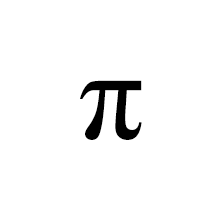
<style>
.page{position:relative;width:221px;height:221px;background:#ffffff}
.page>*{position:absolute;margin:0}
.t1{font:127.8px "TimesNewRomanPSMT";color:#000000}
</style>
<div class="page">
<p class="t1" style="left:80px;top:80px;width:62px;height:60px">π</p>
</div>
